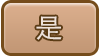
<style>
.page{position:relative;width:100px;height:56px}
.page>*{position:absolute;margin:0}
.t1{font:27px "STHeitiSC-Light";color:#efe2d9}
</style>
<div class="page">
<p class="t1" style="left:36px;top:16px;width:26px;height:24px">是</p>
</div>
